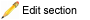
<style>
.page{position:relative;width:90px;height:20px;background:#ffffff}
.page>*{position:absolute;margin:0}
.t1{font:11px "ArialMT";letter-spacing:-0.015em;color:#000000}
</style>
<div class="page">
<p class="t1" style="left:22px;top:6px;width:55px;height:12px">Edit section</p>
</div>
